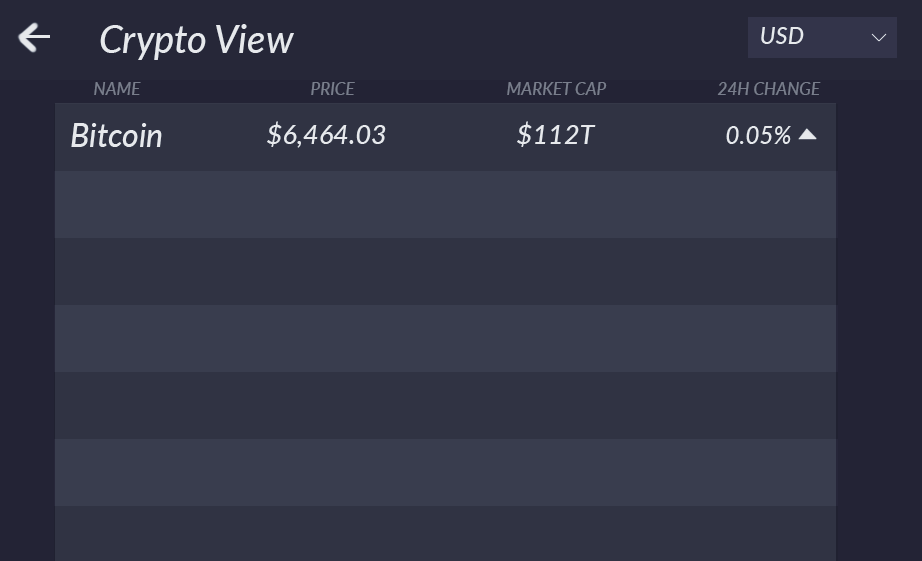
<style>
.page{position:relative;width:922px;height:561px;background:#303343}
.page>*{position:absolute;margin:0}
.t1{font:38px "Lato-MediumItalic";color:#ebebec}
.t2{font:23.3px "Lato-MediumItalic";color:#ebebec}
.t3{font:17.1px "Lato-MediumItalic";color:#797e8c}
.t4{font:32px "Lato-MediumItalic";color:#ebebec}
.t5{font:27.1px "Lato-MediumItalic";color:#ebebec}
.t6{font:24.4px "Lato-MediumItalic";color:#ebebec}
</style>
<div class="page">
<p class="t1" style="left:100px;top:24px;width:194px;height:36px">Crypto View</p>
<p class="t2" style="left:761px;top:27px;width:43px;height:17px">USD</p>
<p class="t3" style="left:94px;top:82px;width:47px;height:13px">NAME</p>
<p class="t3" style="left:311px;top:82px;width:44px;height:13px">PRICE</p>
<p class="t3" style="left:507px;top:82px;width:100px;height:13px">MARKET CAP</p>
<p class="t3" style="left:717px;top:82px;width:104px;height:13px">24H CHANGE</p>
<p class="t4" style="left:71px;top:123px;width:91px;height:24px">Bitcoin</p>
<p class="t5" style="left:267px;top:121px;width:119px;height:27px">$6,464.03</p>
<p class="t5" style="left:517px;top:121px;width:79px;height:26px">$112T</p>
<p class="t6" style="left:726px;top:126px;width:65px;height:18px">0.05%</p>
</div>
